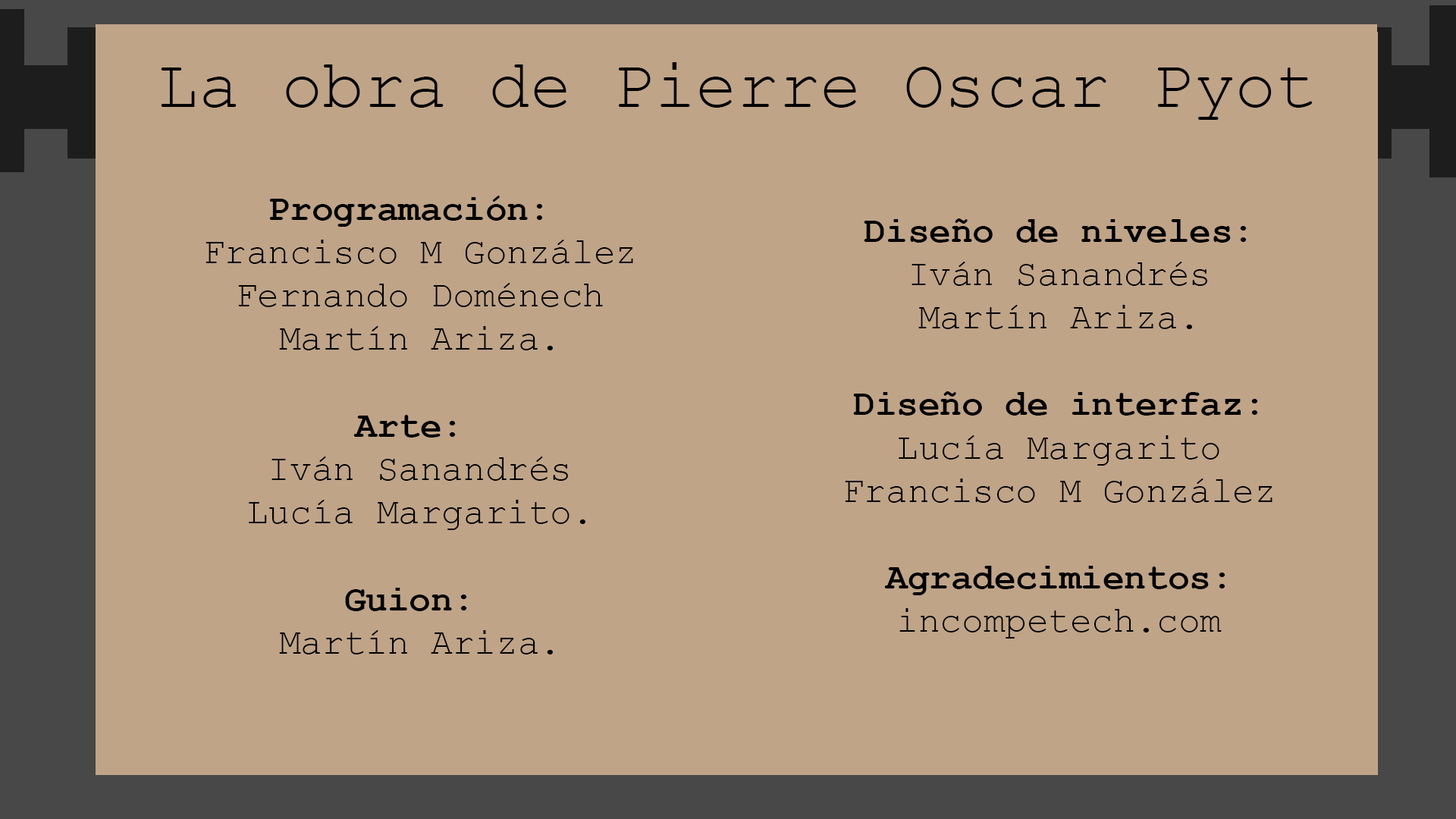
<style>
.page{position:relative;width:1456px;height:819px;background:#bfa488}
.page>*{position:absolute;margin:0}
.t1{font:69.1px "CourierNewPSMT";color:#000000}
.t2{font:36.2px "CourierNewPSMT";color:#000000}
.t3{font:36.2px "CourierNewPS-BoldMT";color:#000000}
.t4{font:36.1px "CourierNewPSMT";color:#000000}
.t5{font:36.1px "CourierNewPS-BoldMT";color:#000000}
</style>
<div class="page">
<p class="t1" style="left:161px;top:62px;width:1152px;height:58px">La obra de Pierre Oscar Pyot</p>
<p class="t2" style="left:206px;top:196px;width:427px;height:458px;text-align:center"><span class="t3">Programación:</span> <br>Francisco M González<br>Fernando Doménech<br>Martín Ariza.<br><br><span class="t3">Arte: <br></span>Iván Sanandrés<br>Lucía Margarito.<br><br><span class="t3">Guion:</span> <br>Martín Ariza.</p>
<p class="t4" style="left:845px;top:218px;width:427px;height:421px;text-align:center"><span class="t5">Diseño de niveles:<br></span>Iván Sanandrés<br>Martín Ariza.<br><br><span class="t5">Diseño de interfaz:<br></span>Lucía Margarito<br>Francisco M González<br><br><span class="t5">Agradecimientos:<br></span>incompetech.com</p>
</div>
